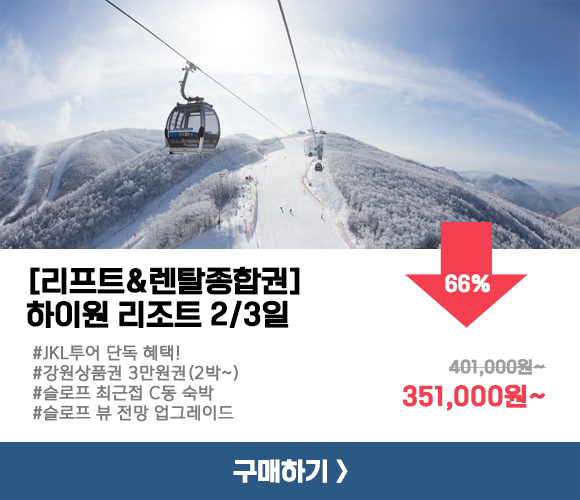
<style>
.page{position:relative;width:580px;height:500px;background:#ffffff}
.page>*{position:absolute;margin:0}
.t1{font:29.2px/33.3px "ONEMobileTitleOTFRegular";letter-spacing:-0.01em;color:#000000;font-weight:bold}
.t2{font:20.8px "ONEMobileTitleOTFRegular";letter-spacing:-0.01em;color:#ffffff;font-weight:bold}
.t3{font:16.7px "ONEMobileOTFRegular";letter-spacing:-0.01em;color:#7c7979;font-weight:bold}
.t4{font:16.7px "ONEMobileTitleOTFRegular";letter-spacing:-0.01em;color:#9f9d9d;font-weight:bold}
.t5{font:25px "ONEMobileTitleOTFRegular";letter-spacing:-0.01em;color:#f33f50;font-weight:bold}
.t6{font:25px "ONEMobileTitleOTFRegular";letter-spacing:-0.005em;color:#ffffff;font-weight:bold}
</style>
<div class="page">
<p class="t1" style="left:26px;top:266px;width:274px;height:62px">[리프트&amp;렌탈종합권]<br>하이원 리조트 2/3일</p>
<p class="t2" style="left:445px;top:274px;width:45px;height:19px">66%</p>
<p class="t3" style="left:33px;top:345px;width:205px;height:77px">#JKL투어 단독 혜택!<br>#강원상품권 3만원권(2박~)<br>#슬로프 최근접 C동 숙박<br>#슬로프 뷰 전망 업그레이드</p>
<p class="t4" style="left:449px;top:359px;width:98px;height:18px">401,000원~</p>
<p class="t5" style="left:403px;top:384px;width:143px;height:27px">351,000원~</p>
<p class="t6" style="left:233px;top:459px;width:115px;height:24px">구매하기 &gt;</p>
</div>
